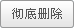
<style>
.page{position:relative;width:74px;height:28px}
.page>*{position:absolute;margin:0}
.t1{font:12px "SimSun";letter-spacing:0.1em;color:#555555}
</style>
<div class="page">
<p class="t1" style="left:12px;top:8px;width:50px;height:11px">彻底删除</p>
</div>
